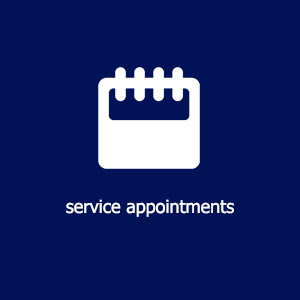
<style>
.page{position:relative;width:300px;height:300px;background:#021257}
.page>*{position:absolute;margin:0}
.t1{font:18px "Tahoma";color:#ffffff}
</style>
<div class="page">
<p class="t1" style="left:66px;top:199px;width:168px;height:18px">service appointments</p>
</div>
